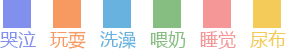
<style>
.page{position:relative;width:286px;height:49px;background:#ffffff}
.page>*{position:absolute;margin:0}
.t1{font:18px "MicrosoftYaHei";color:#f4ca59}
.t2{font:18px "MicrosoftYaHei";color:#8190ed}
.t3{font:18px "MicrosoftYaHei";color:#f69a62}
.t4{font:18px "MicrosoftYaHei";color:#67b2df}
.t5{font:18px "MicrosoftYaHei";color:#86be81}
.t6{font:18px "MicrosoftYaHei";color:#f59797}
</style>
<div class="page">
<p class="t1" style="left:250px;top:30px;width:36px;height:18px">尿布</p>
<p class="t2" style="left:0px;top:31px;width:36px;height:17px">哭泣</p>
<p class="t3" style="left:50px;top:31px;width:36px;height:18px">玩耍</p>
<p class="t4" style="left:100px;top:31px;width:36px;height:18px">洗澡</p>
<p class="t5" style="left:150px;top:31px;width:36px;height:18px">喂奶</p>
<p class="t6" style="left:200px;top:31px;width:36px;height:18px">睡觉</p>
</div>
